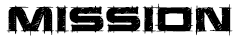
<style>
.page{position:relative;width:240px;height:40px;background:#ffffff}
.page>*{position:absolute;margin:0}
.t1{font:40px "SaucerBB";color:#000000;scale:1.2 1}
</style>
<div class="page">
<p class="t1" style="left:6px;top:3px;width:227px;height:34px">MISSION</p>
</div>
